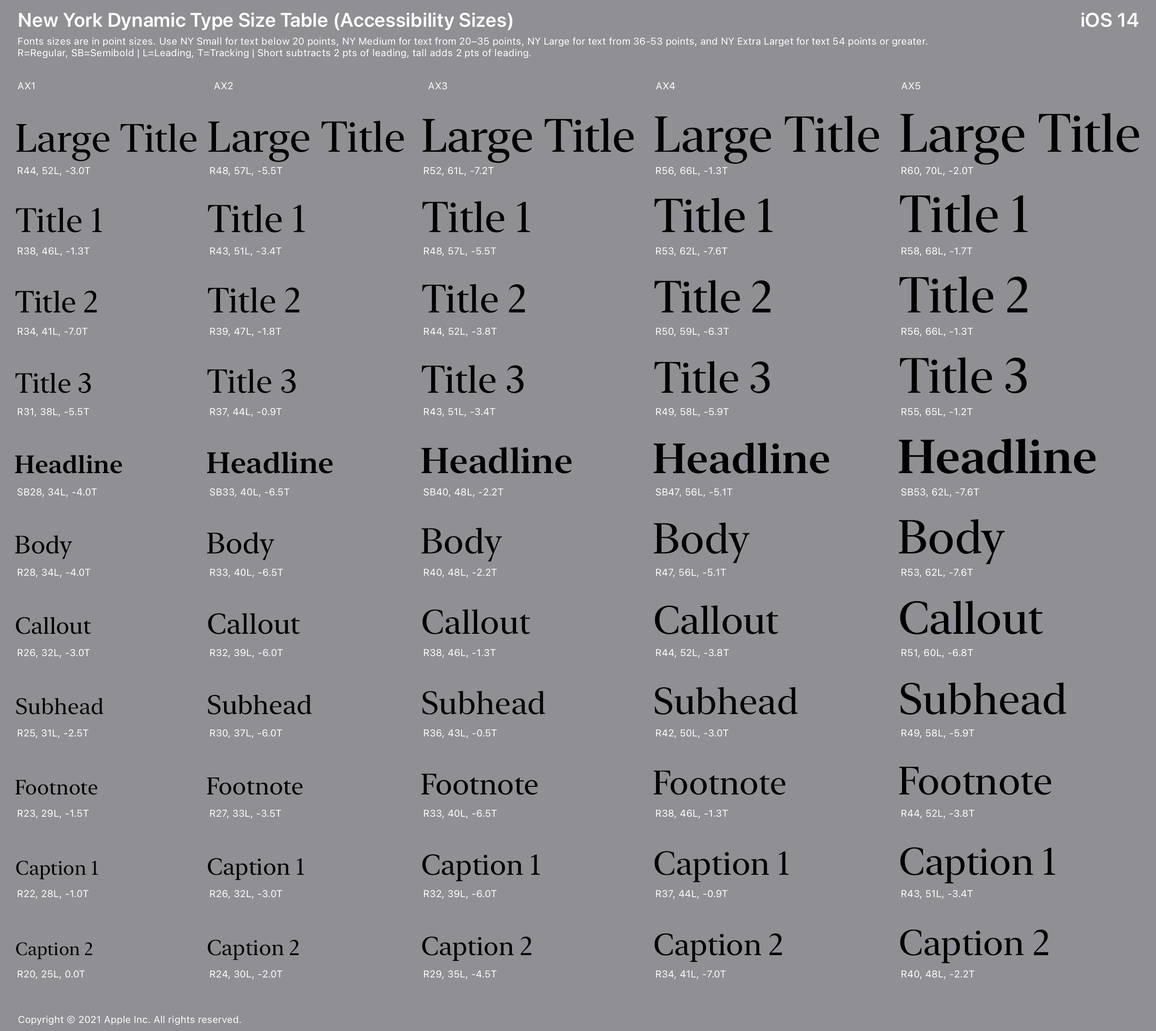
<style>
.page{position:relative;width:1156px;height:1031px;background:#8f8f94}
.page>*{position:absolute;margin:0}
.t1{font:19.6px "SFProDisplay-Semibold";letter-spacing:0.016em;color:#ffffff}
.t2{font:9.8px/11.6px "SFProText-Regular";letter-spacing:0.006em;color:#ffffff}
.t3{font:9.8px "SFProText-Regular";letter-spacing:0.013em;color:#ffffff}
.t4{font:53.6px "NewYorkExtraLarge-Regular";letter-spacing:-0.002em;color:#000000}
.t5{font:39.3px "NewYorkLarge-Regular";letter-spacing:-0.003em;color:#000000}
.t6{font:42.9px "NewYorkLarge-Regular";letter-spacing:-0.005em;color:#000000}
.t7{font:46.4px "NewYorkLarge-Regular";letter-spacing:-0.007em;color:#000000}
.t8{font:50px "NewYorkExtraLarge-Regular";letter-spacing:0.001em;color:#000000}
.t9{font:9.8px/80.4px "SFProText-Regular";letter-spacing:0.006em;color:#ffffff}
.t10{font:47.3px "NewYorkLarge-Regular";letter-spacing:-0.008em;color:#000000}
.t11{font:51.8px "NewYorkExtraLarge-Regular";letter-spacing:0.002em;color:#000000}
.t12{font:33.9px "NewYorkLarge-Regular";letter-spacing:-0.001em;color:#000000}
.t13{font:38.4px "NewYorkLarge-Regular";letter-spacing:-0.003em;color:#000000}
.t14{font:44.6px "NewYorkLarge-Regular";letter-spacing:-0.006em;color:#000000}
.t15{font:50px "NewYorkExtraLarge-Regular";letter-spacing:-0.001em;color:#000000}
.t16{font:30.4px "NewYorkMedium-Regular";letter-spacing:-0.007em;color:#000000}
.t17{font:34.8px "NewYorkLarge-Regular";letter-spacing:-0.002em;color:#000000}
.t18{font:39.3px "NewYorkLarge-Regular";letter-spacing:-0.004em;color:#000000}
.t19{font:43.8px "NewYorkLarge-Regular";letter-spacing:-0.006em;color:#000000}
.t20{font:49.1px "NewYorkExtraLarge-Regular";letter-spacing:-0.001em;color:#000000}
.t21{font:27.7px "NewYorkMedium-Regular";letter-spacing:-0.005em;color:#000000}
.t22{font:33px "NewYorkLarge-Regular";letter-spacing:-0.001em;color:#000000}
.t23{font:35.7px "NewYorkLarge-Semibold";letter-spacing:-0.002em;color:#000000}
.t24{font:42px "NewYorkLarge-Semibold";letter-spacing:-0.005em;color:#000000}
.t25{font:47.3px "NewYorkLarge-Semibold";letter-spacing:-0.008em;color:#000000}
.t26{font:25px "NewYorkMedium-Semibold";letter-spacing:-0.004em;color:#000000}
.t27{font:29.5px "NewYorkMedium-Semibold";letter-spacing:-0.006em;color:#000000}
.t28{font:29.5px "NewYorkMedium-Regular";letter-spacing:-0.006em;color:#000000}
.t29{font:35.7px "NewYorkLarge-Regular";letter-spacing:-0.002em;color:#000000}
.t30{font:25px "NewYorkMedium-Regular";letter-spacing:-0.004em;color:#000000}
.t31{font:45.5px "NewYorkLarge-Regular";letter-spacing:-0.007em;color:#000000}
.t32{font:23.2px "NewYorkMedium-Regular";letter-spacing:-0.003em;color:#000000}
.t33{font:28.6px "NewYorkMedium-Regular";letter-spacing:-0.006em;color:#000000}
.t34{font:33.9px "NewYorkLarge-Regular";letter-spacing:0.001em;color:#000000}
.t35{font:37.5px "NewYorkLarge-Regular";letter-spacing:-0.003em;color:#000000}
.t36{font:22.3px "NewYorkMedium-Regular";letter-spacing:-0.002em;color:#000000}
.t37{font:26.8px "NewYorkMedium-Regular";letter-spacing:-0.006em;color:#000000}
.t38{font:32.1px "NewYorkLarge-Regular";letter-spacing:-0.001em;color:#000000}
.t39{font:20.5px "NewYorkMedium-Regular";letter-spacing:-0.001em;color:#000000}
.t40{font:24.1px "NewYorkMedium-Regular";letter-spacing:-0.003em;color:#000000}
.t41{font:19.6px "NewYorkMedium-Regular";letter-spacing:-0.001em;color:#000000}
.t42{font:21.4px "NewYorkMedium-Regular";letter-spacing:-0.002em;color:#000000}
.t43{font:25.9px "NewYorkMedium-Regular";letter-spacing:-0.004em;color:#000000}
.t44{font:17.9px "NewYorkMedium-Regular";color:#000000}
.t45{font:9.8px "SFProText-Regular";letter-spacing:0.006em;color:#ffffff}
</style>
<div class="page">
<p class="t1" style="left:19px;top:13px;width:494px;height:17px">New York Dynamic Type Size Table (Accessibility Sizes)</p>
<p class="t1" style="left:1082px;top:13px;width:57px;height:14px">iOS 14</p>
<p class="t2" style="left:18px;top:37px;width:910px;height:21px">Fonts sizes are in point sizes. Use NY Small for text below 20 points, NY Medium for text from 20–35 points, NY Large for text from 36-53 points, and NY Extra Larget for text 54 points or greater. <br>R=Regular, SB=Semibold | L=Leading, T=Tracking | Short subtracts 2 pts of leading, tall adds 2 pts of leading.</p>
<p class="t3" style="left:17px;top:82px;width:17px;height:7px">AX1</p>
<p class="t3" style="left:214px;top:82px;width:19px;height:7px">AX2</p>
<p class="t3" style="left:428px;top:82px;width:19px;height:8px">AX3</p>
<p class="t3" style="left:656px;top:82px;width:19px;height:7px">AX4</p>
<p class="t3" style="left:901px;top:82px;width:20px;height:8px">AX5</p>
<p class="t4" style="left:900px;top:113px;width:239px;height:52px">Large Title</p>
<p class="t5" style="left:16px;top:123px;width:180px;height:38px">Large Title</p>
<p class="t6" style="left:208px;top:121px;width:196px;height:41px">Large Title</p>
<p class="t7" style="left:423px;top:118px;width:211px;height:45px">Large Title</p>
<p class="t8" style="left:655px;top:116px;width:224px;height:48px">Large Title</p>
<p class="t9" style="left:17px;top:167px;width:80px;height:812px">R44, 52L, -3.0T<br>R38, 46L, -1.3T<br>R34, 41L, -7.0T<br>R31, 38L, -5.5T<br>SB28, 34L, -4.0T<br>R28, 34L, -4.0T<br>R26, 32L, -3.0T<br>R25, 31L, -2.5T<br>R23, 29L, -1.5T<br>R22, 28L, -1.0T<br>R20, 25L, 0.0T</p>
<p class="t9" style="left:210px;top:167px;width:80px;height:812px">R48, 57L, -5.5T<br>R43, 51L, -3.4T<br>R39, 47L, -1.8T<br>R37, 44L, -0.9T<br>SB33, 40L, -6.5T<br>R33, 40L, -6.5T<br>R32, 39L, -6.0T<br>R30, 37L, -6.0T<br>R27, 33L, -3.5T<br>R26, 32L, -3.0T<br>R24, 30L, -2.0T</p>
<p class="t9" style="left:424px;top:167px;width:80px;height:812px">R52, 61L, -7.2T<br>R48, 57L, -5.5T<br>R44, 52L, -3.8T<br>R43, 51L, -3.4T<br>SB40, 48L, -2.2T<br>R40, 48L, -2.2T<br>R38, 46L, -1.3T<br>R36, 43L, -0.5T<br>R33, 40L, -6.5T<br>R32, 39L, -6.0T<br>R29, 35L, -4.5T</p>
<p class="t9" style="left:656px;top:167px;width:77px;height:812px">R56, 66L, -1.3T<br>R53, 62L, -7.6T<br>R50, 59L, -6.3T<br>R49, 58L, -5.9T<br>SB47, 56L, -5.1T<br>R47, 56L, -5.1T<br>R44, 52L, -3.8T<br>R42, 50L, -3.0T<br>R38, 46L, -1.3T<br>R37, 44L, -0.9T<br>R34, 41L, -7.0T</p>
<p class="t9" style="left:901px;top:167px;width:78px;height:812px">R60, 70L, -2.0T<br>R58, 68L, -1.7T<br>R56, 66L, -1.3T<br>R55, 65L, -1.2T<br>SB53, 62L, -7.6T<br>R53, 62L, -7.6T<br>R51, 60L, -6.8T<br>R49, 58L, -5.9T<br>R44, 52L, -3.8T<br>R43, 51L, -3.4T<br>R40, 48L, -2.2T</p>
<p class="t10" style="left:654px;top:198px;width:119px;height:35px">Title 1</p>
<p class="t11" style="left:900px;top:195px;width:128px;height:38px">Title 1</p>
<p class="t12" style="left:16px;top:208px;width:86px;height:25px">Title 1</p>
<p class="t13" style="left:208px;top:204px;width:97px;height:29px">Title 1</p>
<p class="t6" style="left:422px;top:201px;width:108px;height:32px">Title 1</p>
<p class="t14" style="left:654px;top:280px;width:117px;height:33px">Title 2</p>
<p class="t15" style="left:900px;top:276px;width:128px;height:37px">Title 2</p>
<p class="t16" style="left:15px;top:290px;width:82px;height:23px">Title 2</p>
<p class="t17" style="left:208px;top:287px;width:92px;height:26px">Title 2</p>
<p class="t18" style="left:422px;top:284px;width:103px;height:29px">Title 2</p>
<p class="t13" style="left:422px;top:365px;width:102px;height:28px">Title 3</p>
<p class="t19" style="left:654px;top:361px;width:116px;height:33px">Title 3</p>
<p class="t20" style="left:900px;top:357px;width:127px;height:37px">Title 3</p>
<p class="t21" style="left:15px;top:373px;width:76px;height:20px">Title 3</p>
<p class="t22" style="left:207px;top:369px;width:89px;height:24px">Title 3</p>
<p class="t23" style="left:421px;top:447px;width:151px;height:27px">Headline</p>
<p class="t24" style="left:654px;top:442px;width:175px;height:32px">Headline</p>
<p class="t25" style="left:899px;top:438px;width:197px;height:36px">Headline</p>
<p class="t26" style="left:15px;top:455px;width:107px;height:19px">Headline</p>
<p class="t27" style="left:207px;top:451px;width:126px;height:23px">Headline</p>
<p class="t10" style="left:899px;top:519px;width:106px;height:45px">Body</p>
<p class="t28" style="left:207px;top:532px;width:68px;height:28px">Body</p>
<p class="t29" style="left:421px;top:528px;width:81px;height:34px">Body</p>
<p class="t6" style="left:654px;top:522px;width:96px;height:41px">Body</p>
<p class="t30" style="left:15px;top:535px;width:57px;height:24px">Body</p>
<p class="t18" style="left:655px;top:605px;width:124px;height:29px">Callout</p>
<p class="t31" style="left:900px;top:601px;width:143px;height:34px">Callout</p>
<p class="t32" style="left:16px;top:617px;width:75px;height:17px">Callout</p>
<p class="t33" style="left:208px;top:613px;width:92px;height:21px">Callout</p>
<p class="t34" style="left:422px;top:609px;width:108px;height:25px">Callout</p>
<p class="t35" style="left:655px;top:687px;width:143px;height:28px">Subhead</p>
<p class="t19" style="left:900px;top:683px;width:167px;height:32px">Subhead</p>
<p class="t36" style="left:16px;top:698px;width:88px;height:17px">Subhead</p>
<p class="t37" style="left:208px;top:695px;width:104px;height:20px">Subhead</p>
<p class="t38" style="left:422px;top:691px;width:124px;height:24px">Subhead</p>
<p class="t28" style="left:421px;top:774px;width:117px;height:21px">Footnote</p>
<p class="t12" style="left:654px;top:771px;width:132px;height:24px">Footnote</p>
<p class="t18" style="left:899px;top:767px;width:152px;height:28px">Footnote</p>
<p class="t39" style="left:15px;top:780px;width:82px;height:15px">Footnote</p>
<p class="t40" style="left:207px;top:778px;width:96px;height:17px">Footnote</p>
<p class="t33" style="left:422px;top:854px;width:118px;height:28px">Caption 1</p>
<p class="t22" style="left:654px;top:851px;width:135px;height:32px">Caption 1</p>
<p class="t13" style="left:900px;top:847px;width:155px;height:37px">Caption 1</p>
<p class="t41" style="left:16px;top:861px;width:82px;height:18px">Caption 1</p>
<p class="t32" style="left:208px;top:858px;width:96px;height:22px">Caption 1</p>
<p class="t29" style="left:900px;top:929px;width:149px;height:34px">Caption 2</p>
<p class="t42" style="left:208px;top:940px;width:91px;height:20px">Caption 2</p>
<p class="t43" style="left:422px;top:937px;width:110px;height:24px">Caption 2</p>
<p class="t16" style="left:654px;top:934px;width:128px;height:29px">Caption 2</p>
<p class="t44" style="left:16px;top:942px;width:76px;height:17px">Caption 2</p>
<p class="t45" style="left:18px;top:1016px;width:223px;height:9px">Copyright © 2021 Apple Inc. All rights reserved.</p>
</div>
